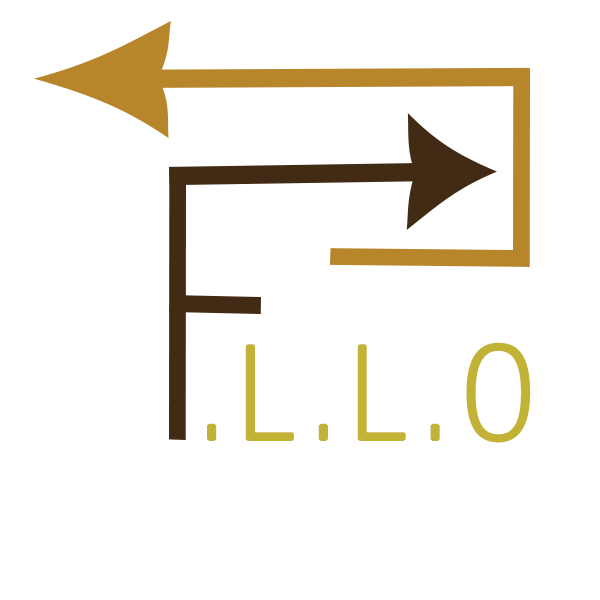
<style>
.page{position:relative;width:600px;height:600px;background:#ffffff}
.page>*{position:absolute;margin:0}
.t1{font:130px "HelveticaNeueLTStd-ThCn";letter-spacing:0.07em;color:#c2b235;font-weight:bold}
</style>
<div class="page">
<p class="t1" style="left:207px;top:342px;width:324px;height:101px">.L.L.O</p>
</div>
